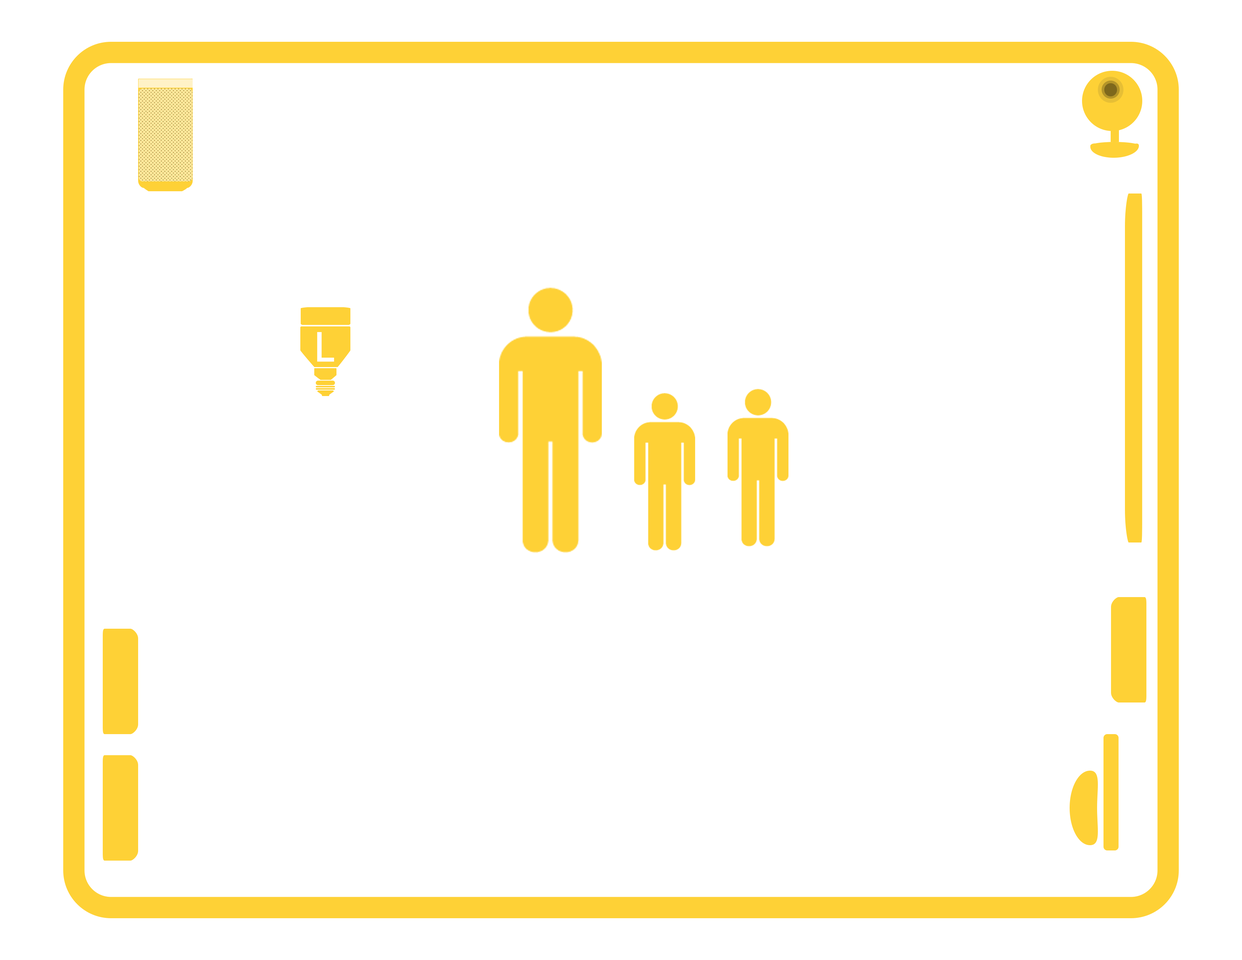
<style>
.page{position:relative;width:1242px;height:960px;background:#ffffff}
.page>*{position:absolute;margin:0}
.t1{font:40.2px "ArialMT";color:#ffffff;font-weight:bold;scale:0.88 1}
</style>
<div class="page">
<p class="t1" style="left:317px;top:332px;width:17px;height:30px">L</p>
</div>
